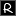
<style>
.page{position:relative;width:16px;height:16px;background:#000000}
.page>*{position:absolute;margin:0}
.t1{font:15px "FinelinerScript";color:#ffffff}
</style>
<div class="page">
<p class="t1" style="left:3px;top:3px;width:10px;height:10px">R</p>
</div>
